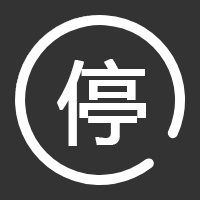
<style>
.page{position:relative;width:200px;height:200px;background:#333333}
.page>*{position:absolute;margin:0}
.t1{font:90px "MicrosoftYaHei";color:#ffffff;text-transform:uppercase;font-weight:bold}
</style>
<div class="page">
<p class="t1" style="left:57px;top:59px;width:89px;height:87px">停</p>
</div>
